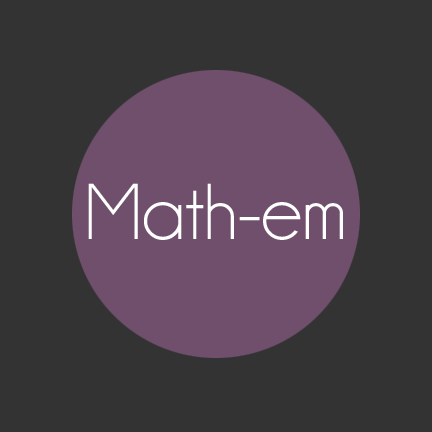
<style>
.page{position:relative;width:432px;height:432px;background:#333333}
.page>*{position:absolute;margin:0}
.t1{font:80px "Champagne&Limousines";color:#ffffff}
</style>
<div class="page">
<p class="t1" style="left:88px;top:183px;width:255px;height:57px">Math-em</p>
</div>
